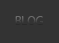
<style>
.page{position:relative;width:59px;height:43px;background:#333333}
.page>*{position:absolute;margin:0}
.t1{font:12px "MyriadPro-Regular"}
</style>
<div class="page">
<p class="t1" style="left:15px;top:16px;width:28px;height:9px">BLOG</p>
</div>
